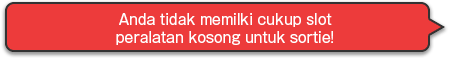
<style>
.page{position:relative;width:450px;height:58px;background:#ed3b3b}
.page>*{position:absolute;margin:0}
.t1{font:14px/18px "GothicMB101Pro-Regular";color:#ffffff}
</style>
<div class="page">
<p class="t1" style="left:116px;top:13px;width:217px;height:32px;text-align:center">Anda tidak memilki cukup slot<br>peralatan kosong untuk sortie!</p>
</div>
